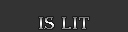
<style>
.page{position:relative;width:128px;height:32px;background:#333333}
.page>*{position:absolute;margin:0}
.t1{font:18px "AlgerianBasD";letter-spacing:0.05em}
</style>
<div class="page">
<p class="t1" style="left:39px;top:17px;width:50px;height:12px">is lit</p>
</div>
